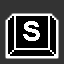
<style>
.page{position:relative;width:64px;height:64px;background:#333333}
.page>*{position:absolute;margin:0}
.t1{font:28px "Arial-BoldMT";color:#ffffff}
</style>
<div class="page">
<p class="t1" style="left:23px;top:21px;width:17px;height:20px">S</p>
</div>
